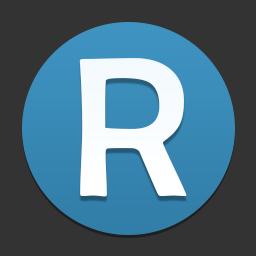
<style>
.page{position:relative;width:256px;height:256px;background:#333333}
.page>*{position:absolute;margin:0}
.t1{font:200.8px "BerlinSansFB-Reg";color:#ffffff}
</style>
<div class="page">
<p class="t1" style="left:79px;top:58px;width:108px;height:139px">R</p>
</div>
